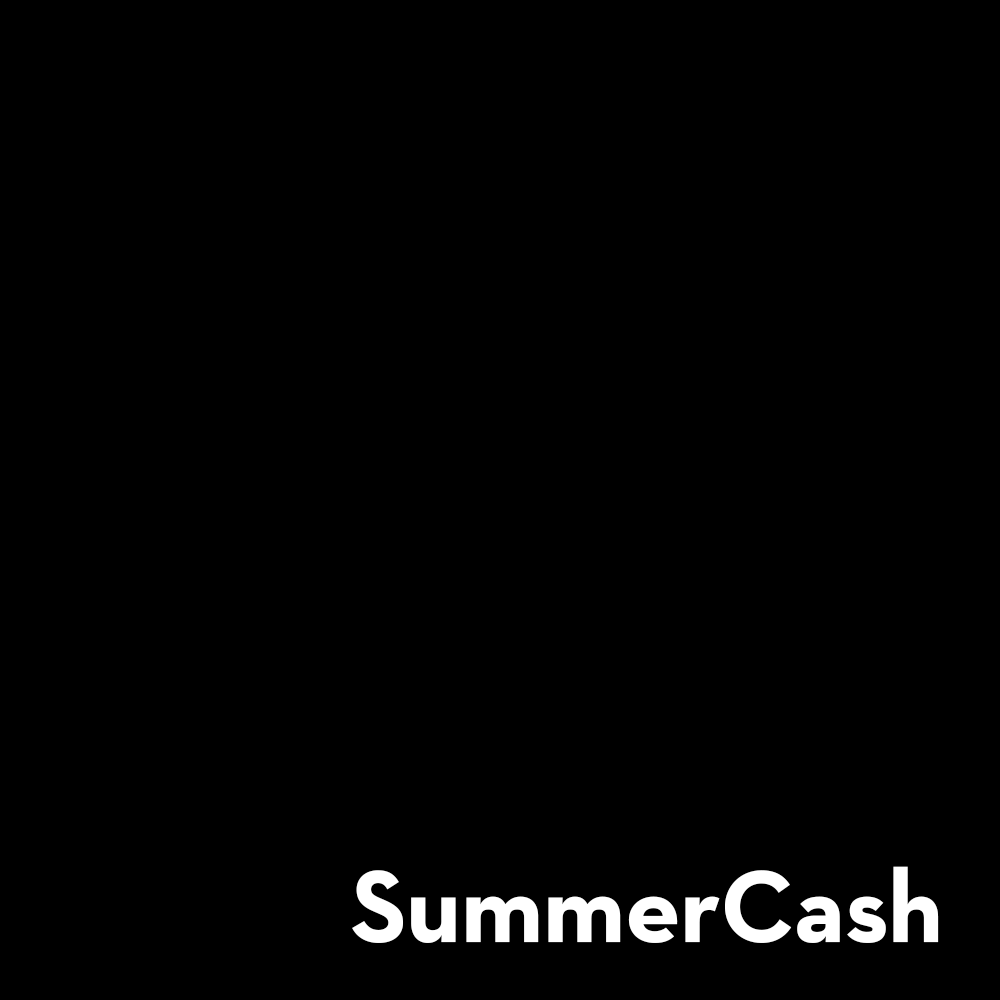
<style>
.page{position:relative;width:1000px;height:1000px;background:#000000}
.page>*{position:absolute;margin:0}
.t1{font:104.2px "NeutraText-Bold";letter-spacing:-0.005em;color:#ffffff}
</style>
<div class="page">
<p class="t1" style="left:352px;top:866px;width:587px;height:77px">SummerCash</p>
</div>
